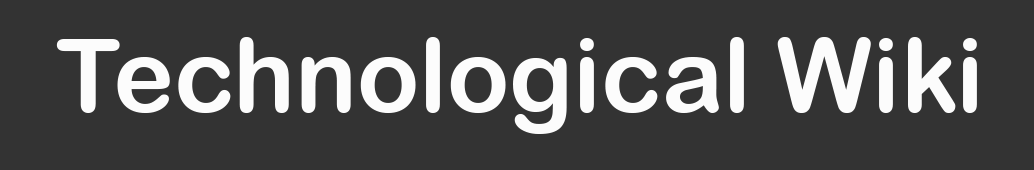
<style>
.page{position:relative;width:1034px;height:170px;background:#333333}
.page>*{position:absolute;margin:0}
.t1{font:102.7px "ArialRoundedMTBold";color:#fcfcfc}
</style>
<div class="page">
<p class="t1" style="left:56px;top:37px;width:921px;height:97px">Technological Wiki</p>
</div>
